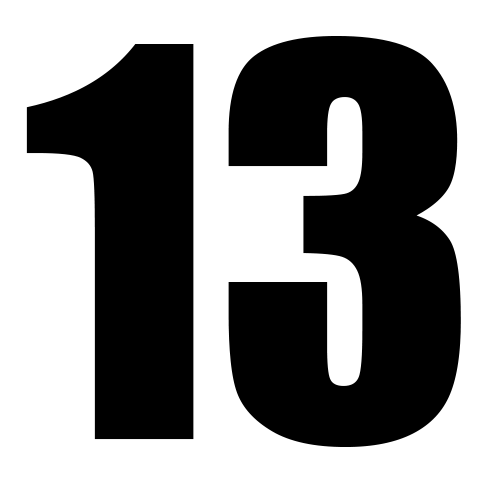
<style>
.page{position:relative;width:480px;height:480px;background:#ffffff}
.page>*{position:absolute;margin:0}
.t1{font:500px "Impact";color:#000000}
</style>
<div class="page">
<p class="t1" style="left:26px;top:36px;width:435px;height:411px">13</p>
</div>
